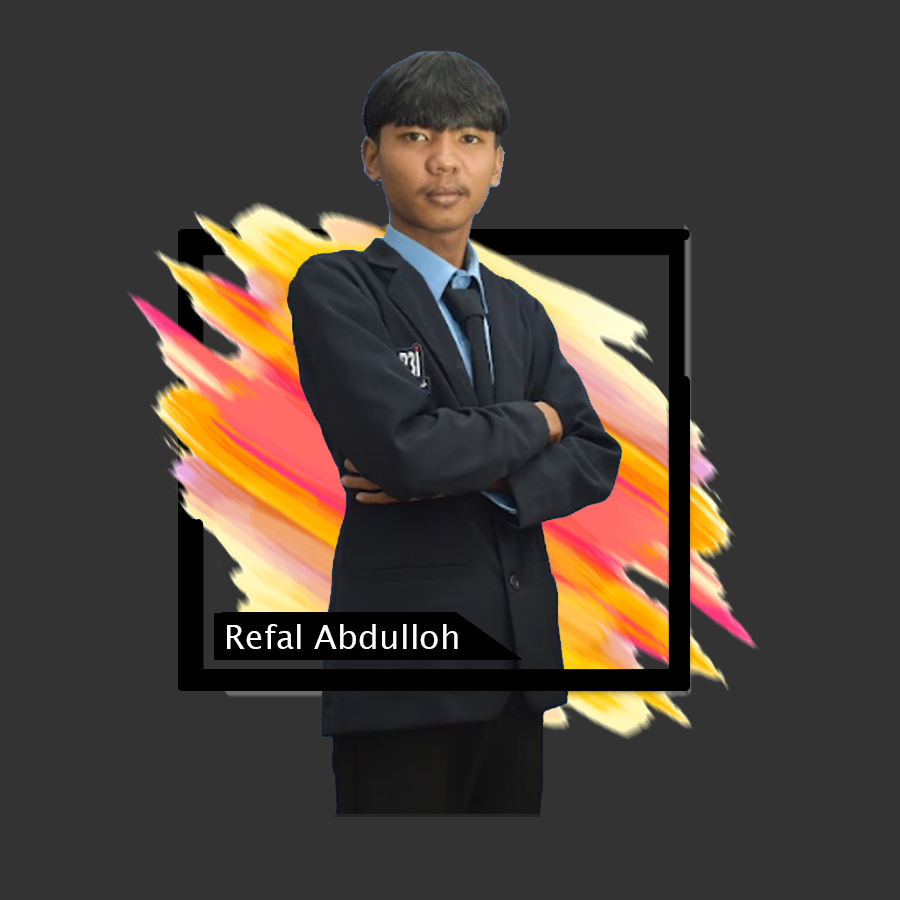
<style>
.page{position:relative;width:900px;height:900px;background:#333333}
.page>*{position:absolute;margin:0}
.t1{font:33.3px "LucidaSansUnicode";color:#ffffff}
</style>
<div class="page">
<p class="t1" style="left:227px;top:624px;width:231px;height:25px">Refal Abdulloh</p>
</div>
